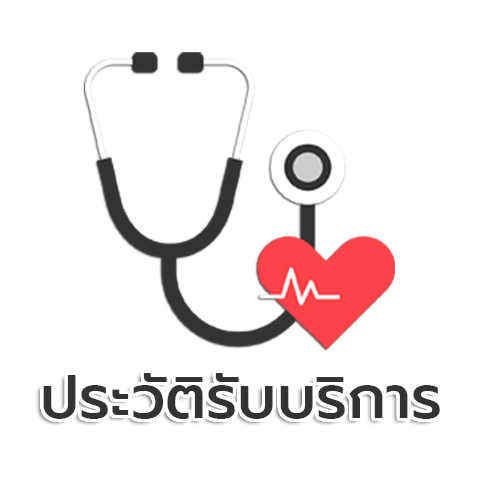
<style>
.page{position:relative;width:480px;height:480px;background:#ffffff}
.page>*{position:absolute;margin:0}
.t1{font:60px "Prompt-Medium";color:#333333}
</style>
<div class="page">
<p class="t1" style="left:43px;top:373px;width:397px;height:46px">ประวัติรับบริการ</p>
</div>
